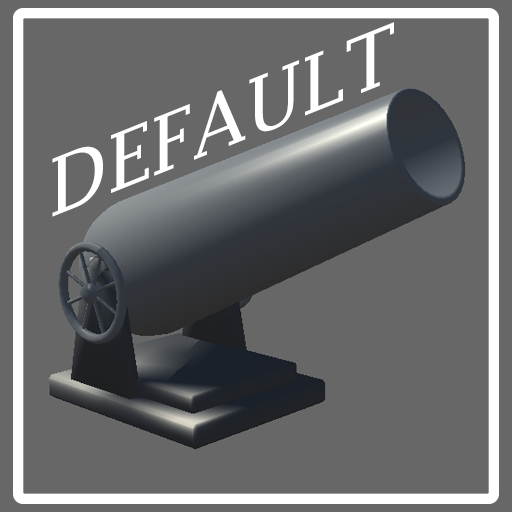
<style>
.page{position:relative;width:512px;height:512px;background:#676767}
.page>*{position:absolute;margin:0}
.t1{font:80px "LucidaFax";color:#ffffff}
</style>
<div class="page">
<p class="t1" style="left:52px;top:22px;width:342px;height:195px;rotate:-22deg">DEFAULT</p>
</div>
